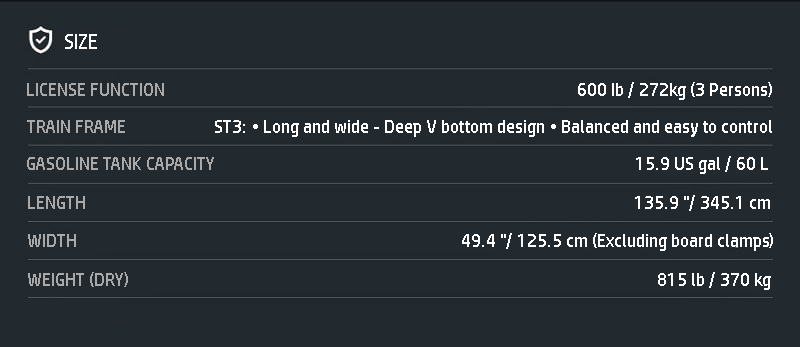
<style>
.page{position:relative;width:800px;height:347px;background:#22292f}
.page>*{position:absolute;margin:0}
.t1{font:20px "HPSimplified-Regular";color:#ffffff}
.t2{font:18px "HPSimplified-Regular";color:#ffffff}
.t3{font:18px "HPSimplified-Regular";color:#a9a9a9}
</style>
<div class="page">
<p class="t1" style="left:65px;top:34px;width:32px;height:15px">SIZE</p>
<p class="t2" style="left:27px;top:82px;width:745px;height:18px"><span class="t3">LICENSE FUNCTION  </span>                                                                                                     600 Ib / 272kg (3 Persons)</p>
<p class="t2" style="left:27px;top:120px;width:745px;height:17px"><span class="t3">TRAIN FRAME      </span>                ST3: • Long and wide - Deep V bottom design • Balanced and easy to control</p>
<p class="t3" style="left:27px;top:156px;width:741px;height:18px">GASOLINE TANK CAPACITY<span class="t2">                                                                                                         15.9 US gal / 60 L</span></p>
<p class="t2" style="left:28px;top:195px;width:742px;height:16px"><span class="t3">LENGTH  </span>                                                                                                                                       135.9 "/ 345.1 cm</p>
<p class="t2" style="left:28px;top:233px;width:745px;height:18px"><span class="t3">WIDTH  </span>                                                                                              49.4 "/ 125.5 cm (Excluding board clamps)</p>
<p class="t2" style="left:28px;top:272px;width:743px;height:18px"><span class="t3">WEIGHT (DRY)  </span>                                                                                                                                  815 lb / 370 kg</p>
</div>
